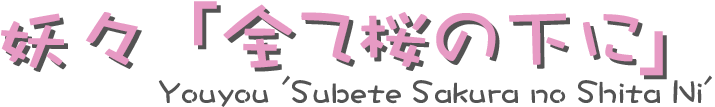
<style>
.page{position:relative;width:715px;height:107px;background:#ffffff}
.page>*{position:absolute;margin:0}
.t1{font:80px "DFCraftYu-W7-WING-RKSJ-H";color:#e79ac4}
.t2{font:80px "DFCraftYu-W7-WING-RKSJ-H"}
.t3{font:32px "DFCraftYu-W7-WING-RKSJ-H";color:#535353}
</style>
<div class="page">
<p class="t1" style="left:1px;top:1px;width:662px;height:75px">妖々 「全て桜の下に」</p>
<p class="t2" style="left:5px;top:5px;width:662px;height:75px">妖々 「全て桜の下に」</p>
<p class="t3" style="left:158px;top:75px;width:554px;height:32px">Youyou 'Subete Sakura no Shita Ni'</p>
</div>
